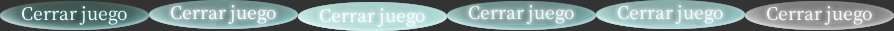
<style>
.page{position:relative;width:894px;height:31px;background:#333333}
.page>*{position:absolute;margin:0}
.t1{font:21px "OfficialFateFont-Medium";color:#edfdfd}
.t2{font:21px "OfficialFateFont-Medium";color:#f5fefe}
.t3{font:21px "OfficialFateFont-Medium";color:#f9f9f9}
</style>
<div class="page">
<p class="t1" style="left:21px;top:6px;width:106px;height:19px">Cerrar juego</p>
<p class="t2" style="left:170px;top:5px;width:106px;height:19px">Cerrar juego</p>
<p class="t1" style="left:468px;top:5px;width:106px;height:19px">Cerrar juego</p>
<p class="t1" style="left:617px;top:5px;width:106px;height:19px">Cerrar juego</p>
<p class="t3" style="left:766px;top:6px;width:106px;height:19px">Cerrar juego</p>
<p class="t2" style="left:319px;top:8px;width:106px;height:19px">Cerrar juego</p>
</div>
